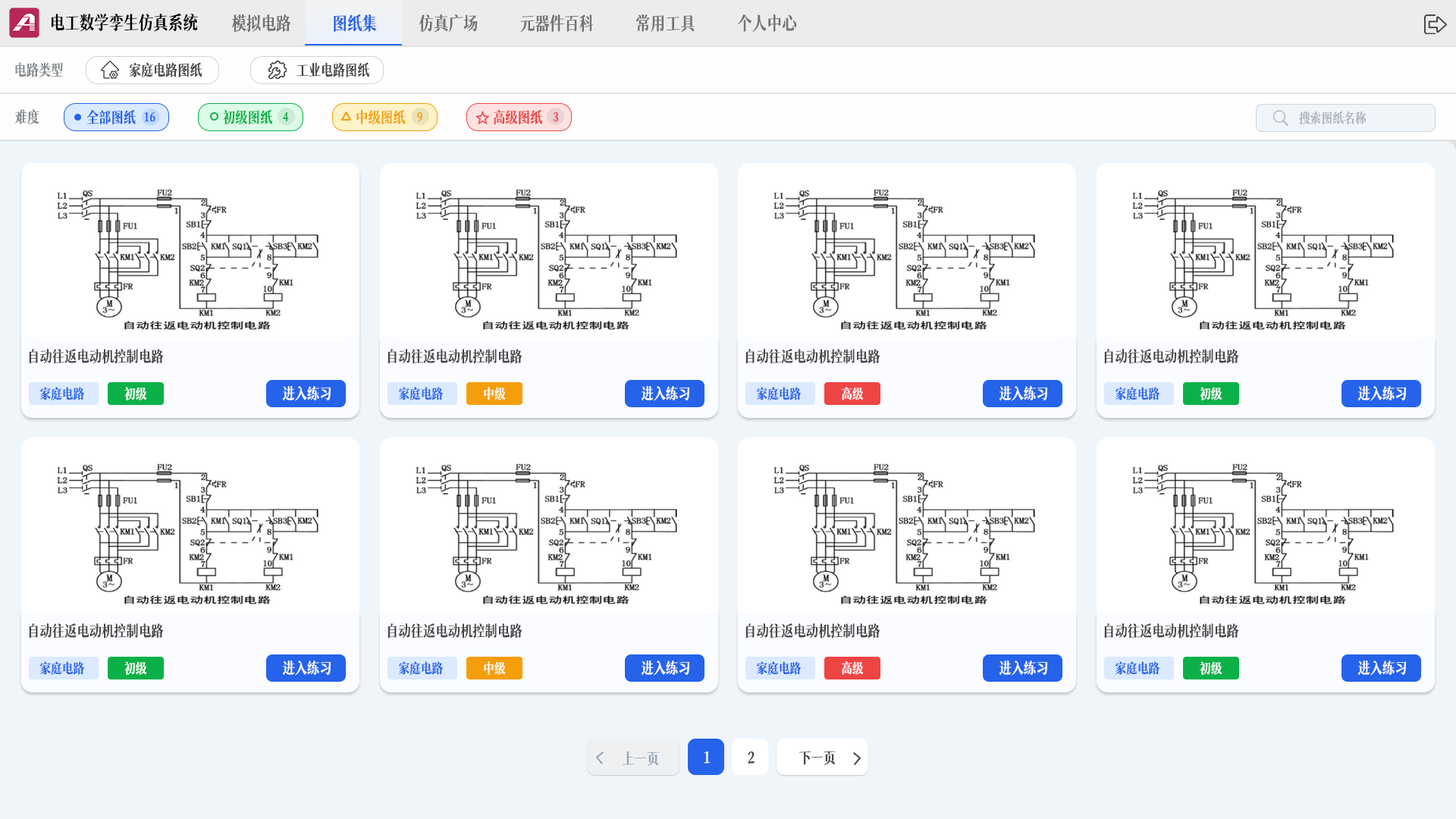
<style>
.page{position:relative;width:1456px;height:819px;background:#ffffff}
.page>*{position:absolute;margin:0}
.t1{font:18.2px "MaoKenWangFengYaSong";color:#020202}
.t2{font:18.1px "MaoKenWangFengYaSong";color:#727272}
.t3{font:18.1px "MaoKenWangFengYaSong";color:#2563eb}
.t4{font:15.4px "MaoKenWangFengYaSong";color:#858a8d}
.t5{font:15.2px "MaoKenWangFengYaSong";color:#464646}
.t6{font:15.2px "MaoKenWangFengYaSong";color:#2563eb}
.t7{font:12.1px "MaoKenWangFengYaSong";color:#2563eb}
.t8{font:15.2px "MaoKenWangFengYaSong";color:#0bb148}
.t9{font:12.1px "MaoKenWangFengYaSong";color:#0bb148}
.t10{font:15.2px "MaoKenWangFengYaSong";color:#f59e0b}
.t11{font:12.1px "MaoKenWangFengYaSong";color:#f59e0b}
.t12{font:15.2px "MaoKenWangFengYaSong";color:#ef4444}
.t13{font:12.1px "MaoKenWangFengYaSong";color:#ef4444}
.t14{font:13.6px "MaoKenWangFengYaSong";color:#b1b7be}
.t15{font:13.6px "MaoKenWangFengYaSong";color:#2563eb}
.t16{font:13.6px "MaoKenWangFengYaSong";color:#ffffff}
.t17{font:15.2px "MaoKenWangFengYaSong";color:#ffffff}
.t18{font:15.2px "MaoKenWangFengYaSong";color:#94a3b8}
.t19{font:15.3px "MaoKenWangFengYaSong";color:#464646}
</style>
<div class="page">
<p class="t1" style="left:52px;top:13px;width:146px;height:19px">电工数学孪生仿真系统</p>
<p class="t2" style="left:231px;top:14px;width:60px;height:18px">模拟电路</p>
<p class="t3" style="left:334px;top:14px;width:43px;height:18px">图纸集</p>
<p class="t2" style="left:419px;top:14px;width:59px;height:19px">仿真广场</p>
<p class="t2" style="left:520px;top:14px;width:74px;height:19px">元器件百科</p>
<p class="t2" style="left:636px;top:14px;width:59px;height:18px">常用工具</p>
<p class="t2" style="left:737px;top:14px;width:60px;height:18px">个人中心</p>
<p class="t4" style="left:15px;top:62px;width:48px;height:15px">电路类型</p>
<p class="t5" style="left:129px;top:62px;width:73px;height:15px">家庭电路图纸</p>
<p class="t5" style="left:297px;top:62px;width:72px;height:15px">工业电路图纸</p>
<p class="t4" style="left:15px;top:109px;width:24px;height:15px">难度</p>
<p class="t6" style="left:86px;top:109px;width:50px;height:16px">全部图纸</p>
<p class="t7" style="left:144px;top:111px;width:11px;height:11px">16</p>
<p class="t8" style="left:223px;top:109px;width:49px;height:16px">初级图纸</p>
<p class="t9" style="left:283px;top:112px;width:6px;height:9px">4</p>
<p class="t10" style="left:356px;top:109px;width:50px;height:16px">中级图纸</p>
<p class="t11" style="left:417px;top:111px;width:5px;height:11px">9</p>
<p class="t12" style="left:493px;top:109px;width:50px;height:16px">高级图纸</p>
<p class="t13" style="left:553px;top:111px;width:5px;height:11px">3</p>
<p class="t14" style="left:1299px;top:111px;width:67px;height:14px">搜索图纸名称</p>
<p class="t5" style="left:29px;top:349px;width:135px;height:15px">自动往返电动机控制电路</p>
<p class="t5" style="left:388px;top:349px;width:134px;height:15px">自动往返电动机控制电路</p>
<p class="t5" style="left:745px;top:349px;width:135px;height:15px">自动往返电动机控制电路</p>
<p class="t5" style="left:1104px;top:349px;width:135px;height:15px">自动往返电动机控制电路</p>
<p class="t15" style="left:40px;top:387px;width:44px;height:13px">家庭电路</p>
<p class="t16" style="left:124px;top:387px;width:23px;height:13px">初级</p>
<p class="t17" style="left:282px;top:386px;width:49px;height:15px">进入练习</p>
<p class="t15" style="left:399px;top:387px;width:44px;height:13px">家庭电路</p>
<p class="t16" style="left:484px;top:387px;width:22px;height:13px">中级</p>
<p class="t17" style="left:641px;top:386px;width:48px;height:15px">进入练习</p>
<p class="t15" style="left:757px;top:387px;width:44px;height:13px">家庭电路</p>
<p class="t16" style="left:841px;top:387px;width:23px;height:13px">高级</p>
<p class="t17" style="left:999px;top:386px;width:48px;height:15px">进入练习</p>
<p class="t15" style="left:1115px;top:387px;width:44px;height:13px">家庭电路</p>
<p class="t16" style="left:1200px;top:387px;width:22px;height:13px">初级</p>
<p class="t17" style="left:1357px;top:386px;width:49px;height:15px">进入练习</p>
<p class="t5" style="left:29px;top:623px;width:135px;height:16px">自动往返电动机控制电路</p>
<p class="t5" style="left:388px;top:623px;width:134px;height:16px">自动往返电动机控制电路</p>
<p class="t5" style="left:745px;top:623px;width:135px;height:16px">自动往返电动机控制电路</p>
<p class="t5" style="left:1104px;top:623px;width:135px;height:16px">自动往返电动机控制电路</p>
<p class="t15" style="left:40px;top:661px;width:44px;height:14px">家庭电路</p>
<p class="t16" style="left:124px;top:661px;width:23px;height:14px">初级</p>
<p class="t17" style="left:282px;top:660px;width:49px;height:16px">进入练习</p>
<p class="t15" style="left:399px;top:661px;width:44px;height:14px">家庭电路</p>
<p class="t16" style="left:484px;top:661px;width:22px;height:14px">中级</p>
<p class="t17" style="left:641px;top:660px;width:48px;height:16px">进入练习</p>
<p class="t15" style="left:757px;top:661px;width:44px;height:14px">家庭电路</p>
<p class="t16" style="left:841px;top:661px;width:23px;height:14px">高级</p>
<p class="t17" style="left:999px;top:660px;width:48px;height:16px">进入练习</p>
<p class="t15" style="left:1115px;top:661px;width:44px;height:14px">家庭电路</p>
<p class="t16" style="left:1200px;top:661px;width:22px;height:14px">初级</p>
<p class="t17" style="left:1357px;top:660px;width:49px;height:16px">进入练习</p>
<p class="t18" style="left:622px;top:751px;width:37px;height:15px">上一页</p>
<p class="t17" style="left:704px;top:751px;width:6px;height:13px">1</p>
<p class="t19" style="left:748px;top:751px;width:7px;height:13px">2</p>
<p class="t5" style="left:799px;top:751px;width:37px;height:14px">下一页</p>
</div>
